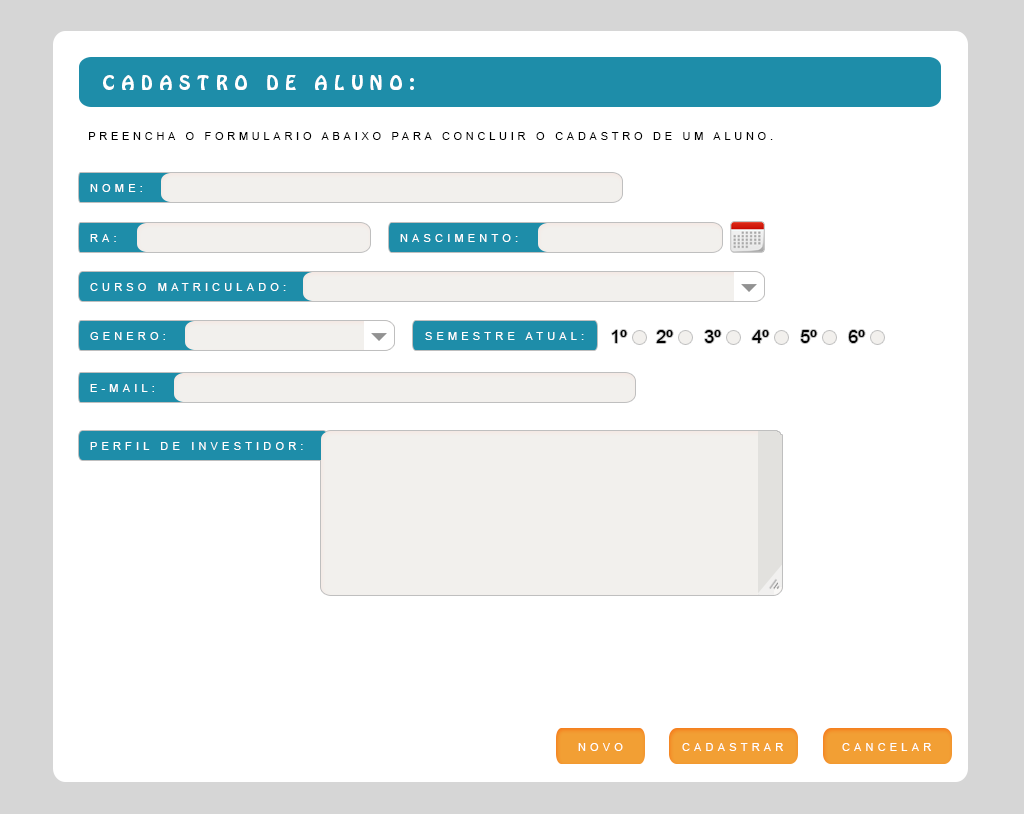
<style>
.page{position:relative;width:1024px;height:814px;background:#ffffff}
.page>*{position:absolute;margin:0}
.t1{font:18px "HoboStd";letter-spacing:0.38em;color:#ffffff;text-transform:uppercase}
.t2{font:11px "ArialMT";letter-spacing:0.34em;color:#000000;text-transform:uppercase}
.t3{font:11px "ArialMT";letter-spacing:0.38em;color:#ffffff;text-transform:uppercase}
.t4{font:18px "ArialMT";color:#000000;text-transform:uppercase}
</style>
<div class="page">
<p class="t1" style="left:103px;top:75px;width:311px;height:15px">Cadastro de Aluno:</p>
<p class="t2" style="left:89px;top:132px;width:684px;height:8px">Preencha o formulario abaixo para concluir o cadastro de um aluno.</p>
<p class="t3" style="left:90px;top:184px;width:52px;height:8px">Nome:</p>
<p class="t3" style="left:90px;top:234px;width:26px;height:8px">RA:</p>
<p class="t3" style="left:400px;top:234px;width:118px;height:8px">Nascimento:</p>
<p class="t3" style="left:90px;top:283px;width:196px;height:8px">curso matriculado:</p>
<p class="t3" style="left:90px;top:332px;width:75px;height:8px">Genero:</p>
<p class="t3" style="left:425px;top:332px;width:159px;height:8px">Semestre Atual:</p>
<p class="t4" style="left:612px;top:330px;width:15px;height:13px">1º</p>
<p class="t4" style="left:656px;top:330px;width:17px;height:13px">2º</p>
<p class="t4" style="left:705px;top:330px;width:16px;height:13px">3º</p>
<p class="t4" style="left:752px;top:330px;width:17px;height:13px">4º</p>
<p class="t4" style="left:801px;top:330px;width:16px;height:13px">5º</p>
<p class="t4" style="left:848px;top:330px;width:17px;height:13px">6º</p>
<p class="t3" style="left:90px;top:384px;width:64px;height:8px">E-mail:</p>
<p class="t3" style="left:90px;top:442px;width:213px;height:8px">Perfil de Investidor:</p>
<p class="t3" style="left:578px;top:743px;width:45px;height:8px">Novo</p>
<p class="t3" style="left:682px;top:743px;width:101px;height:8px">Cadastrar</p>
<p class="t3" style="left:842px;top:743px;width:89px;height:8px">Cancelar</p>
</div>
